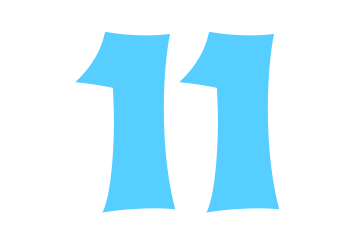
<style>
.page{position:relative;width:354px;height:236px;background:#ffffff}
.page>*{position:absolute;margin:0}
.t1{font:250px "SpicyRice-Regular";color:#56ceff}
</style>
<div class="page">
<p class="t1" style="left:75px;top:31px;width:205px;height:182px">11</p>
</div>
